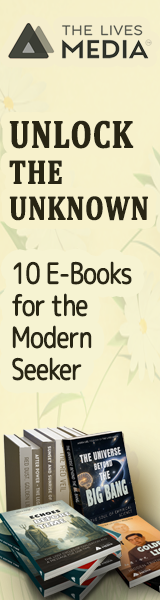
<style>
.page{position:relative;width:160px;height:600px}
.page>*{position:absolute;margin:0}
.t1{font:33.8px/36px "Cambria-Bold";letter-spacing:0.025em;color:#282514;font-weight:bold;scale:0.77 1}
.t2{font:39px/36px "Cambria-Bold";letter-spacing:0.025em;color:#282514;font-weight:bold;scale:0.77 1}
.t3{font:28.8px/32px "RoundedMplus1c-Regular";letter-spacing:-0.05em;color:#282514;font-weight:bold;scale:0.83 1}
</style>
<div class="page">
<p class="t1" style="left:9px;top:120px;width:139px;height:101px"><span class="t2">UNLOCK <br></span>THE <br>UNKNOWN</p>
<p class="t3" style="left:12px;top:261px;width:120px;height:120px">10 E-Books <br>for the <br>Modern <br>Seeker</p>
</div>
